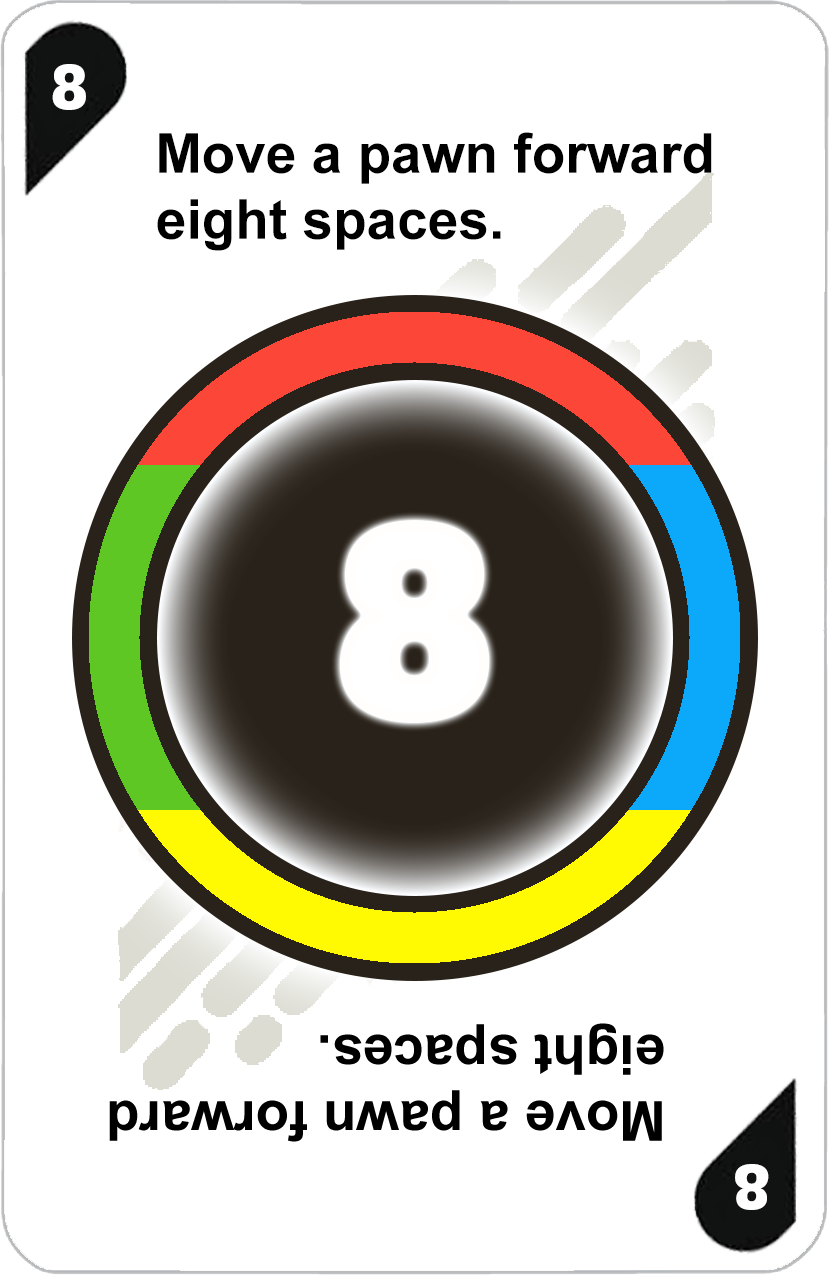
<style>
.page{position:relative;width:829px;height:1275px;background:#ffffff}
.page>*{position:absolute;margin:0}
.t1{font:72px "AdGothic-Regular";color:#ffffff}
.t2{font:55px "Arial-BoldMT";color:#000000}
.t3{font:300px "AdGothic-Regular";color:#ffffff}
</style>
<div class="page">
<p class="t1" style="left:52px;top:64px;width:34px;height:46px">8</p>
<p class="t2" style="left:157px;top:132px;width:555px;height:119px">Move a pawn forward <br>eight spaces.</p>
<p class="t3" style="left:345px;top:525px;width:139px;height:193px">8</p>
</div>
